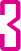
<style>
.page{position:relative;width:21px;height:51px;background:#ffffff}
.page>*{position:absolute;margin:0}
.t1{font:66.7px "AgencyFB-Reg";color:#dd008c}
</style>
<div class="page">
<p class="t1" style="left:0px;top:0px;width:21px;height:51px">3</p>
</div>
